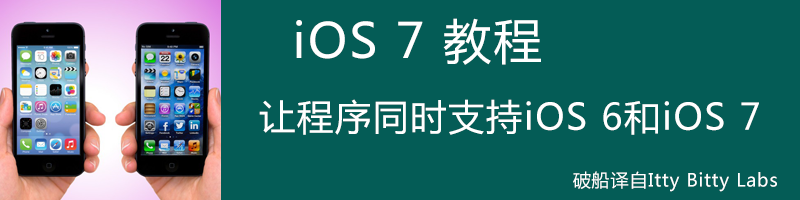
<style>
.page{position:relative;width:800px;height:200px;background:#045c56}
.page>*{position:absolute;margin:0}
.t1{font:48px "MicrosoftYaHei";letter-spacing:0.05em;color:#ffffff}
.t2{font:36px "MicrosoftYaHei";letter-spacing:0.05em;color:#ffffff}
.t3{font:18px "MicrosoftYaHei";letter-spacing:0.05em;color:#ffffff}
</style>
<div class="page">
<p class="t1" style="left:296px;top:18px;width:245px;height:47px">iOS 7 教程</p>
<p class="t2" style="left:259px;top:99px;width:500px;height:36px">让程序同时支持iOS 6和iOS 7</p>
<p class="t3" style="left:573px;top:171px;width:204px;height:21px">破船译自Itty Bitty Labs</p>
</div>
